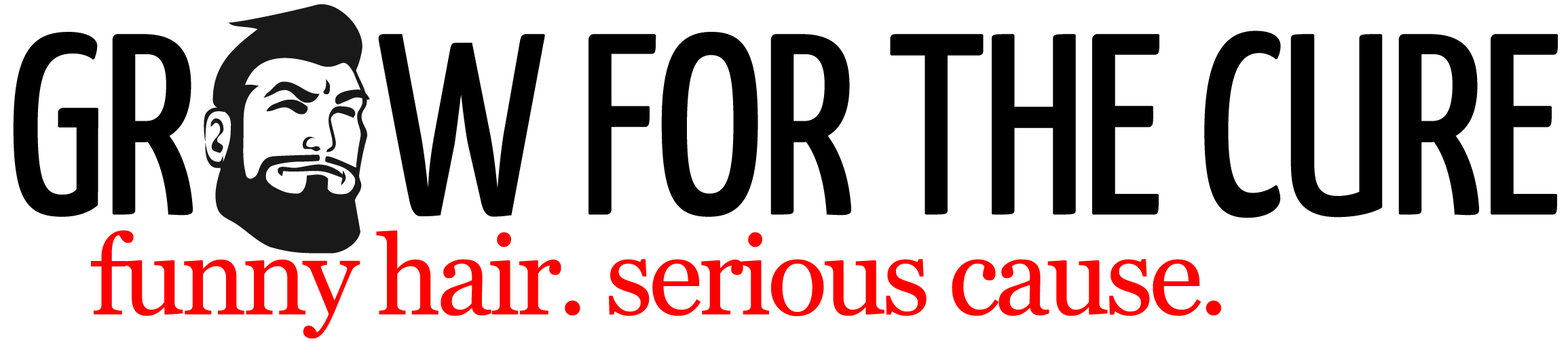
<style>
.page{position:relative;width:1568px;height:341px;background:#ffffff}
.page>*{position:absolute;margin:0}
.t1{font:255.2px "YanoneKaffeesatz-Regular";letter-spacing:-0.04em;color:#000000;text-transform:uppercase;font-weight:bold}
.t2{font:111.2px "Georgia";letter-spacing:-0.04em;color:#ff0000}
</style>
<div class="page">
<p class="t1" style="left:13px;top:31px;width:1545px;height:188px">gr     w for the cure</p>
<p class="t2" style="left:91px;top:230px;width:1130px;height:109px">funny hair. serious cause.</p>
</div>
